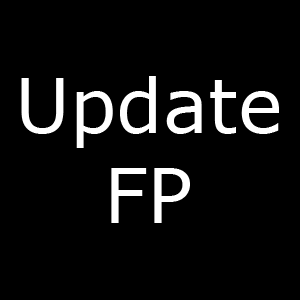
<style>
.page{position:relative;width:300px;height:300px;background:#000000}
.page>*{position:absolute;margin:0}
.t1{font:75px "Verdana";color:#ffffff}
</style>
<div class="page">
<p class="t1" style="left:21px;top:76px;width:258px;height:147px;text-align:center">Update<br>FP</p>
</div>
